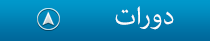
<style>
.page{position:relative;width:210px;height:41px}
.page>*{position:absolute;margin:0}
.t1{font:36px "AdobeArabic-Regular";color:#fcfcfc}
</style>
<div class="page">
<p class="t1" style="left:115px;top:6px;width:59px;height:24px">دورات</p>
</div>
